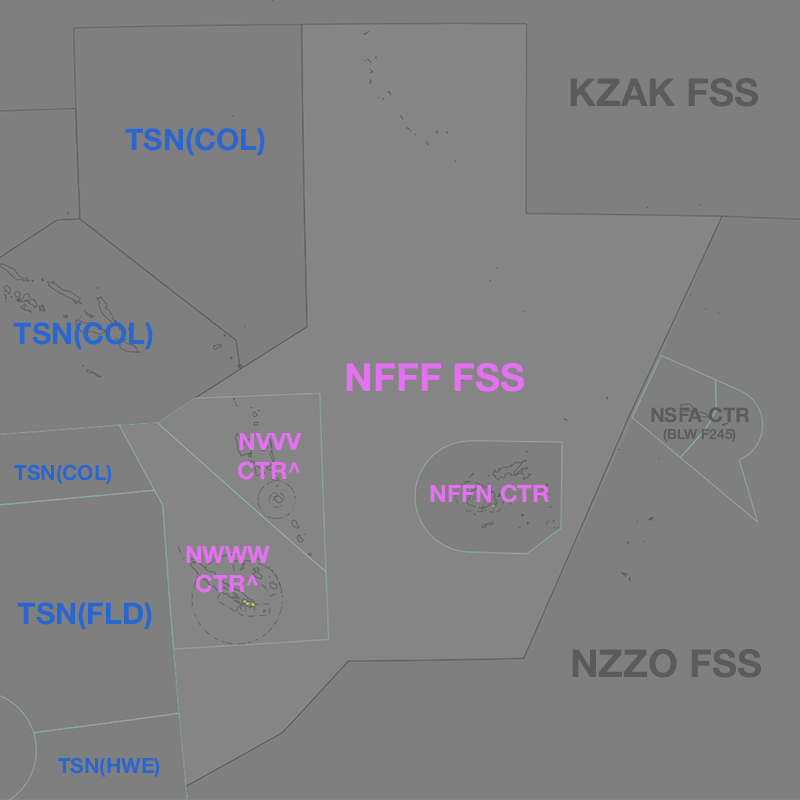
<style>
.page{position:relative;width:800px;height:800px;background:#7f7f7f}
.page>*{position:absolute;margin:0}
.t1{font:38.6px "HelveticaNeue-Bold";color:#5b5b5b}
.t2{font:29.9px "HelveticaNeue-Bold";color:#2967cf}
.t3{font:38.6px "HelveticaNeue-Bold";color:#e570f1}
.t4{font:13.9px "HelveticaNeue-Medium";color:#5b5b5b}
.t5{font:20.1px "HelveticaNeue-Bold";color:#5b5b5b}
.t6{font:23.9px "HelveticaNeue-Bold";color:#e570f1}
.t7{font:20.9px "HelveticaNeue-Bold";color:#2967cf}
</style>
<div class="page">
<p class="t1" style="left:570px;top:78px;width:188px;height:29px">KZAK FSS</p>
<p class="t2" style="left:125px;top:128px;width:140px;height:28px">TSN(COL)</p>
<p class="t2" style="left:13px;top:322px;width:140px;height:28px">TSN(COL)</p>
<p class="t3" style="left:346px;top:363px;width:178px;height:29px">NFFF FSS</p>
<p class="t4" style="left:651px;top:407px;width:98px;height:35px;text-align:center"><span class="t5">NSFA CTR<br></span>(BLW F245)</p>
<p class="t6" style="left:238px;top:433px;width:64px;height:47px;text-align:center">NVVV<br>CTR^</p>
<p class="t7" style="left:14px;top:464px;width:98px;height:20px">TSN(COL)</p>
<p class="t6" style="left:430px;top:484px;width:119px;height:19px">NFFN CTR</p>
<p class="t6" style="left:186px;top:546px;width:84px;height:47px;text-align:center">NWWW<br>CTR^</p>
<p class="t2" style="left:17px;top:602px;width:135px;height:28px">TSN(FLD)</p>
<p class="t1" style="left:572px;top:648px;width:189px;height:30px">NZZO FSS</p>
<p class="t7" style="left:58px;top:757px;width:102px;height:20px">TSN(HWE)</p>
</div>
